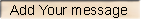
<style>
.page{position:relative;width:141px;height:20px}
.page>*{position:absolute;margin:0}
.t1{font:14px "ArialMT";color:#000000}
</style>
<div class="page">
<p class="t1" style="left:10px;top:5px;width:117px;height:13px">Add Your message</p>
</div>
